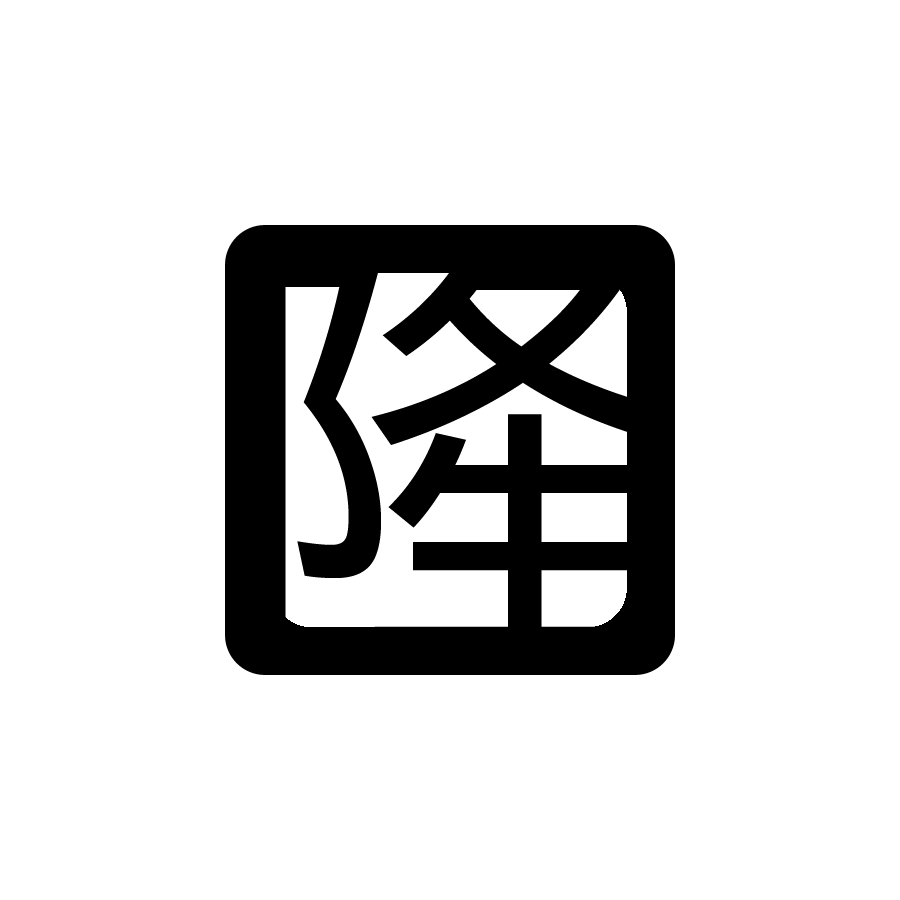
<style>
.page{position:relative;width:900px;height:900px;background:#ffffff}
.page>*{position:absolute;margin:0}
.t1{font:456.6px "BIZ-UDGothic";color:#000000}
</style>
<div class="page">
<p class="t1" style="left:252px;top:232px;width:417px;height:438px">隆</p>
</div>
